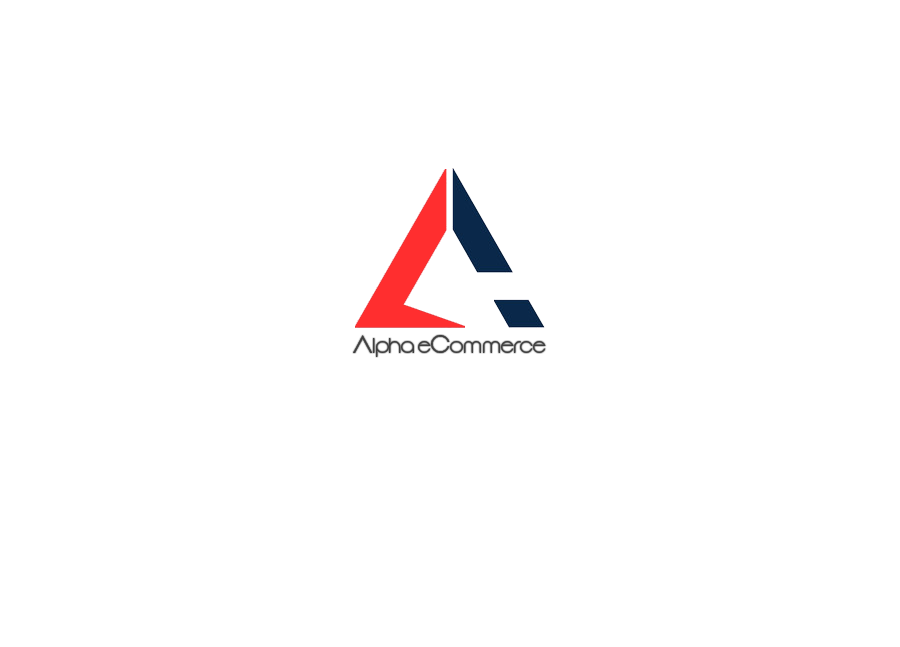
<style>
.page{position:relative;width:900px;height:647px;background:#ffffff}
.page>*{position:absolute;margin:0}
.t1{font:16.8px "Vonique92";color:#404040}
.t2{font:25.2px "Vonique92";color:#404040}
</style>
<div class="page">
<p class="t1" style="left:353px;top:335px;width:193px;height:22px"><span class="t2">A</span>lpha e<span class="t2">C</span>ommerce</p>
</div>
